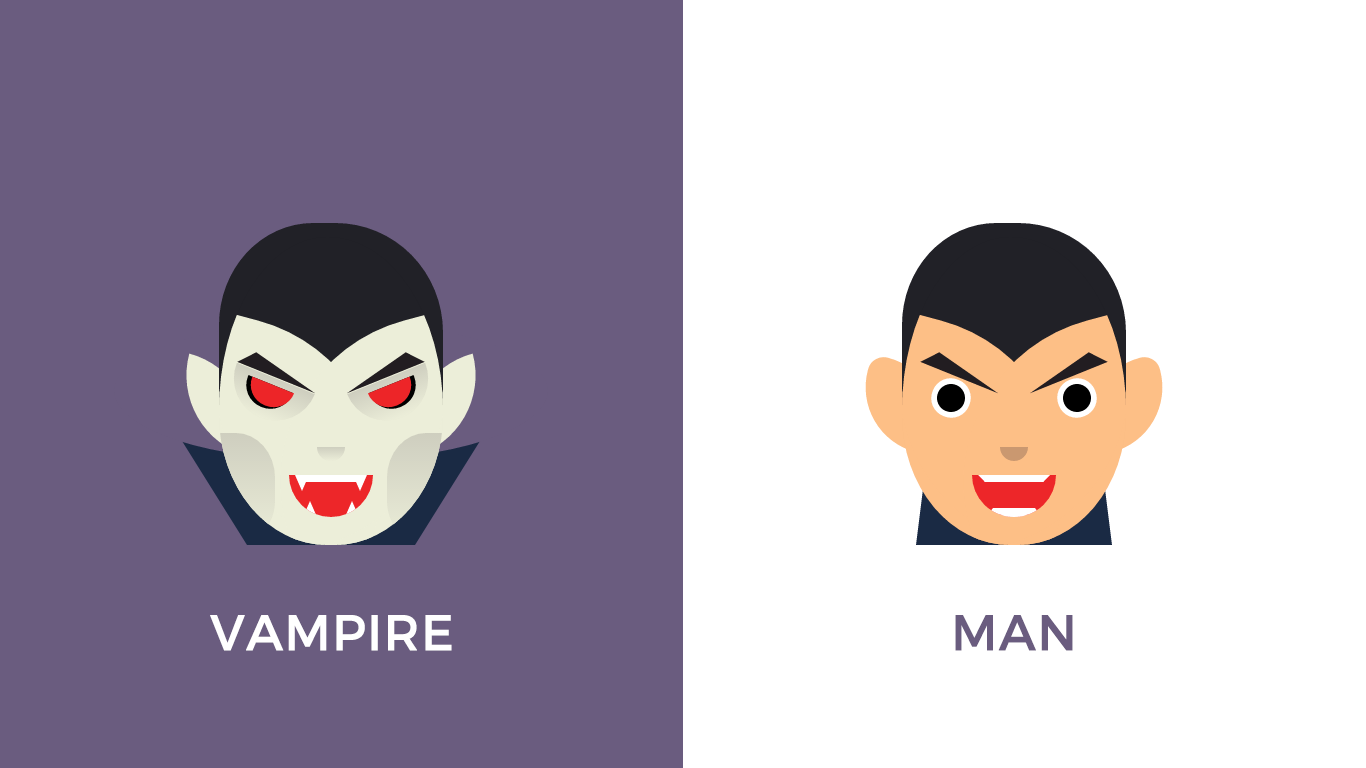
<style>
.page{position:relative;width:1366px;height:768px;background:#ffffff}
.page>*{position:absolute;margin:0}
.t1{font:50px "Montserrat-Regular";color:#ffffff;font-weight:bold}
.t2{font:50px "Montserrat-Regular";color:#6a5c7f;font-weight:bold}
</style>
<div class="page">
<p class="t1" style="left:210px;top:615px;width:242px;height:36px">VAMPIRE</p>
<p class="t2" style="left:955px;top:615px;width:118px;height:36px">MAN</p>
</div>
